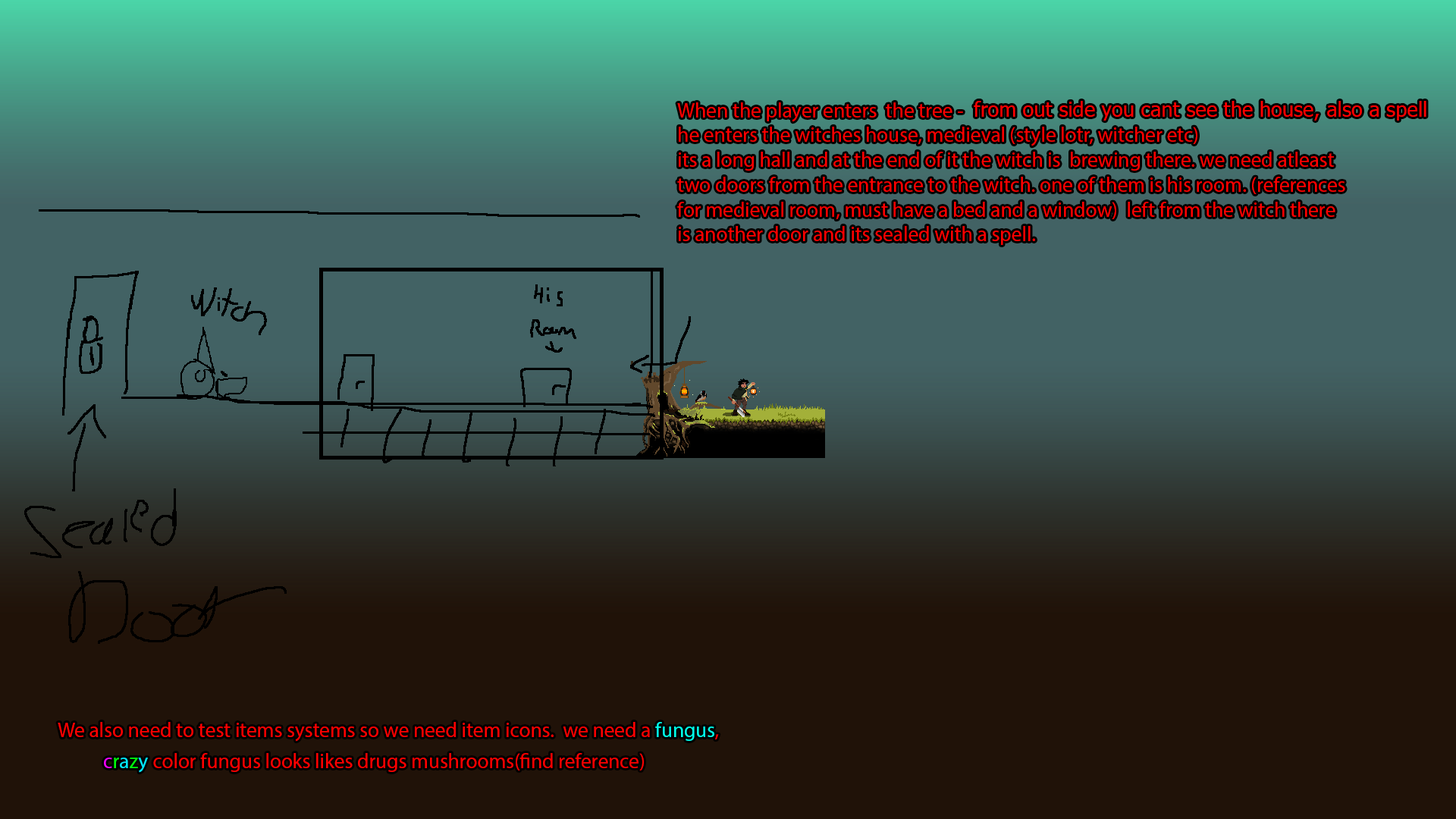
<style>
.page{position:relative;width:1456px;height:819px;background:#201208}
.page>*{position:absolute;margin:0}
.t1{font:20.7px "Tahoma";color:#ff0000}
.t2{font:20.7px "MyriadPro-Regular";color:#ff0000}
.t3{font:20.7px "MyriadPro-Regular";color:#00ffea}
.t4{font:20.7px "MyriadPro-Regular";color:#f600ff}
.t5{font:20.7px "MyriadPro-Regular";color:#00ff0c}
.t6{font:20.7px "MyriadPro-Regular";color:#00eaff}
</style>
<div class="page">
<p class="t1" style="left:974px;top:101px;width:452px;height:20px">from out side you cant see the house, also a spell</p>
<p class="t2" style="left:677px;top:102px;width:668px;height:143px">When the player enters  the tree -<br>he enters the witches house, medieval (style lotr, witcher etc)<br>its a long hall and at the end of it the witch is  brewing there. we need atleast two doors from the entrance to the witch. one of them is his room. (references for medieval room, must have a bed and a window)  left from the witch there is another door and its sealed with a spell.</p>
<p class="t2" style="left:58px;top:722px;width:661px;height:20px">We also need to test items systems so we need item icons.  we need a <span class="t3">fungus</span>,</p>
<p class="t2" style="left:104px;top:753px;width:540px;height:20px"><span class="t4">c</span><span class="t5">r</span><span class="t6">a</span><span class="t5">z</span><span class="t6">y</span> color fungus looks likes drugs mushrooms(find reference)</p>
</div>
